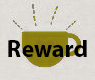
<style>
.page{position:relative;width:95px;height:80px}
.page>*{position:absolute;margin:0}
.t1{font:24px "MyriadPro-Bold";color:#000000}
</style>
<div class="page">
<p class="t1" style="left:8px;top:40px;width:79px;height:17px">Reward</p>
</div>
